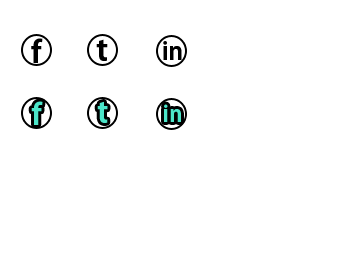
<style>
.page{position:relative;width:355px;height:270px;background:#ffffff}
.page>*{position:absolute;margin:0}
.t1{font:30px "AdobeGothicStd-Bold";color:#000000}
.t2{font:24px "AdobeGothicStd-Bold";color:#000000}
.t3{font:29px "AdobeGothicStd-Bold";color:#4ce5c9}
.t4{font:22px "AdobeGothicStd-Bold";color:#4ce5c9}
</style>
<div class="page">
<p class="t1" style="left:31px;top:38px;width:12px;height:25px">f</p>
<p class="t1" style="left:96px;top:39px;width:12px;height:22px">t</p>
<p class="t2" style="left:163px;top:41px;width:19px;height:19px">in</p>
<p class="t3" style="left:31px;top:101px;width:12px;height:24px">f</p>
<p class="t3" style="left:97px;top:101px;width:11px;height:22px">t</p>
<p class="t4" style="left:164px;top:104px;width:17px;height:18px">in</p>
</div>
